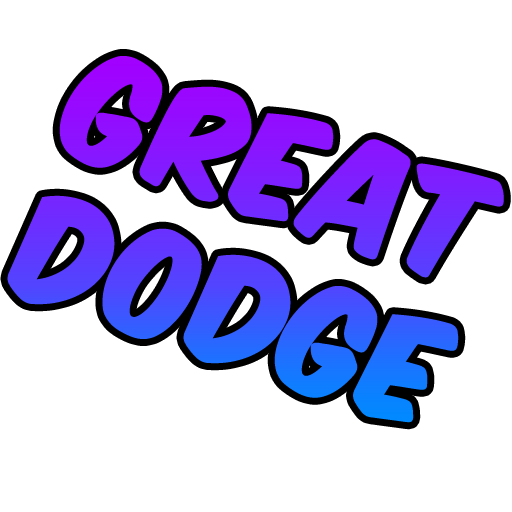
<style>
.page{position:relative;width:512px;height:512px;background:#ffffff}
.page>*{position:absolute;margin:0}
.t1{font:125px "KomikaAxis";font-weight:bold}
</style>
<div class="page">
<p class="t1" style="left:7px;top:56px;width:497px;height:367px;rotate:19deg">Great Dodge</p>
</div>
